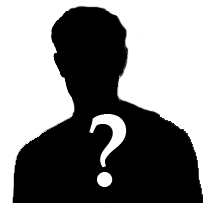
<style>
.page{position:relative;width:203px;height:203px;background:#ffffff}
.page>*{position:absolute;margin:0}
.t1{font:100px "PalatinoLinotype-Bold";color:#ffffff}
</style>
<div class="page">
<p class="t1" style="left:89px;top:114px;width:38px;height:73px">?</p>
</div>
